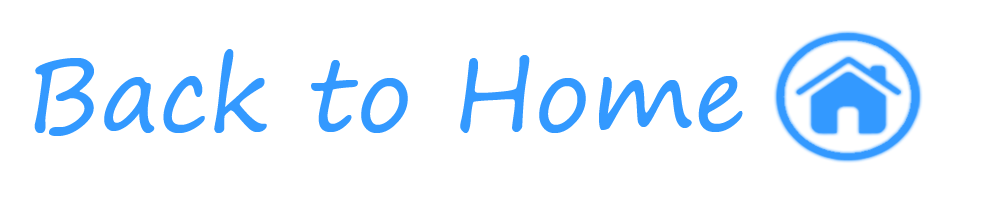
<style>
.page{position:relative;width:984px;height:197px;background:#ffffff}
.page>*{position:absolute;margin:0}
.t1{font:100.4px "SegoePrint";color:#3399ff}
</style>
<div class="page">
<p class="t1" style="left:34px;top:49px;width:709px;height:87px">Back to Home</p>
</div>
